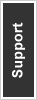
<style>
.page{position:relative;width:37px;height:100px;background:#333333}
.page>*{position:absolute;margin:0}
.t1{font:14px "Arial-BoldMT";letter-spacing:0.02em;color:#ffffff}
</style>
<div class="page">
<p class="t1" style="left:12px;top:22px;width:13px;height:56px;rotate:-90deg">Support</p>
</div>
